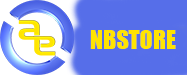
<style>
.page{position:relative;width:187px;height:75px;background:#566ee9}
.page>*{position:absolute;margin:0}
.t1{font:24px "Impact";color:#ffe401}
</style>
<div class="page">
<p class="t1" style="left:90px;top:30px;width:86px;height:19px">NBSTORE</p>
</div>
